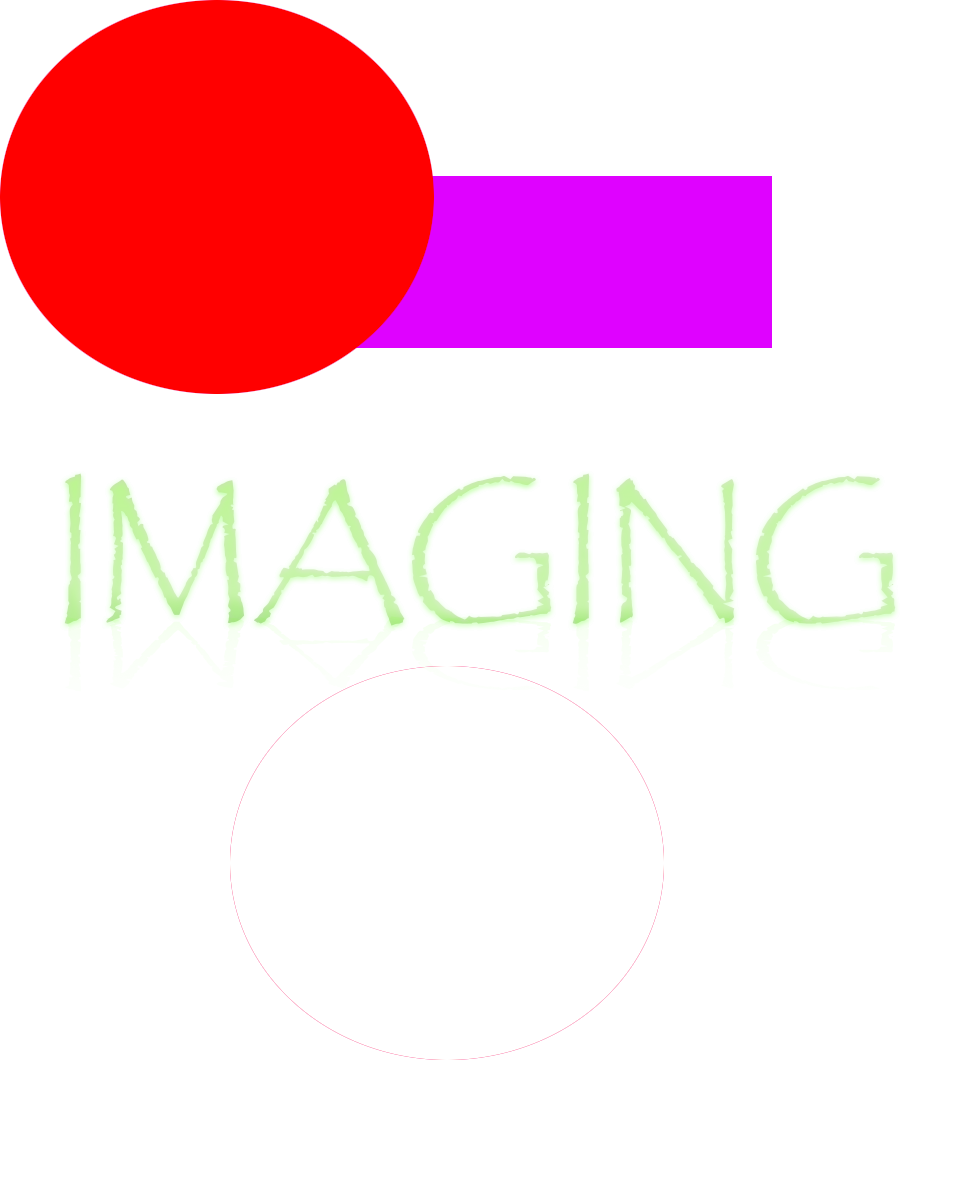
<style>
.page{position:relative;width:960px;height:1200px;background:#ffffff}
.page>*{position:absolute;margin:0}
.t1{font:154.2px "Papyrus-Regular";color:#c7f2aa}
</style>
<div class="page">
<p class="t1" style="left:64px;top:473px;width:832px;height:153px">IMAGING</p>
</div>
